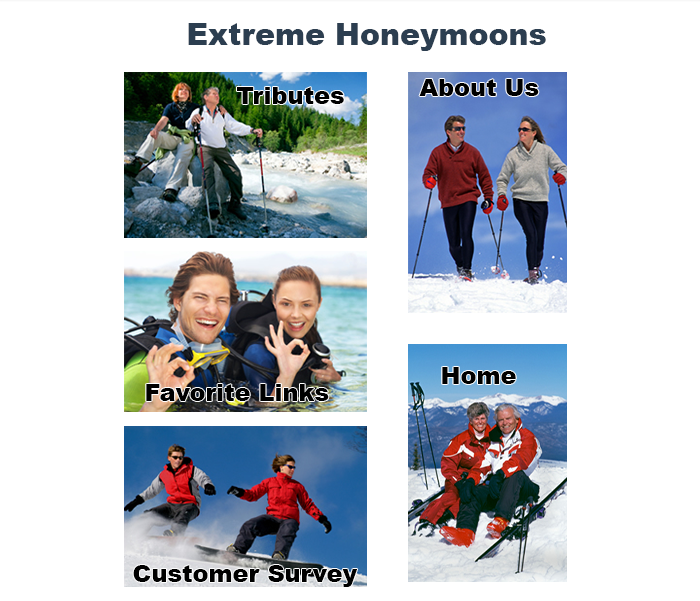
<style>
.page{position:relative;width:700px;height:601px;background:#ffffff}
.page>*{position:absolute;margin:0}
.t1{font:30px "Arial-Black";color:#2c3e50}
.t2{font:24px "Arial-Black";color:#000000}
</style>
<div class="page">
<p class="t1" style="left:188px;top:23px;width:358px;height:28px">Extreme Honeymoons</p>
<p class="t2" style="left:237px;top:87px;width:107px;height:17px">Tributes</p>
<p class="t2" style="left:419px;top:79px;width:120px;height:17px">About Us</p>
<p class="t2" style="left:442px;top:367px;width:74px;height:17px">Home</p>
<p class="t2" style="left:146px;top:384px;width:183px;height:17px">Favorite Links</p>
<p class="t2" style="left:133px;top:565px;width:225px;height:22px">Customer Survey</p>
</div>
